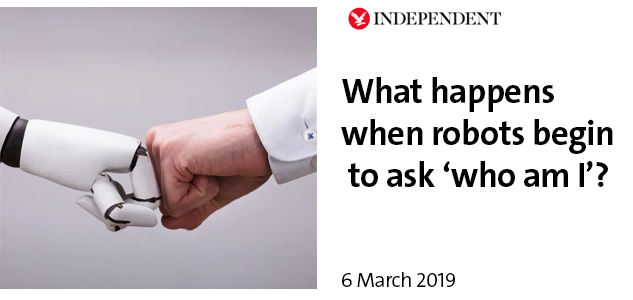
<style>
.page{position:relative;width:633px;height:300px;background:#ffffff}
.page>*{position:absolute;margin:0}
.t1{font:35px "V&ATheSansC6s-Bold";letter-spacing:-0.02em;color:#000000}
.t2{font:20.8px "V&ATheSansC6s-SemiLight";letter-spacing:-0.02em;color:#000000}
</style>
<div class="page">
<p class="t1" style="left:341px;top:77px;width:272px;height:110px">What happens <br>when robots begin<br> to ask ‘who am I’?</p>
<p class="t2" style="left:342px;top:272px;width:113px;height:15px">6 March 2019</p>
</div>
